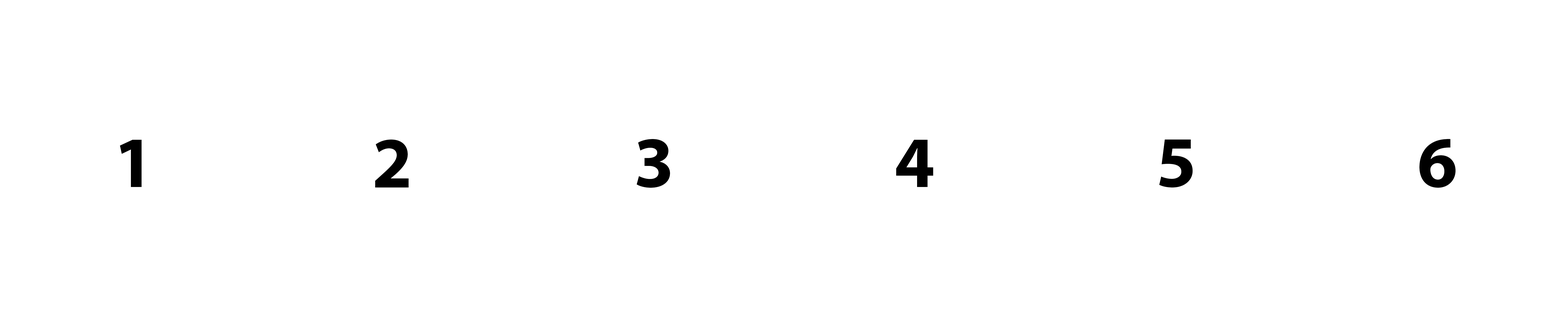
<style>
.page{position:relative;width:1568px;height:327px;background:#ffffff}
.page>*{position:absolute;margin:0}
.t1{font:72.6px "MyriadPro-Bold";color:#000000}
</style>
<div class="page">
<p class="t1" style="left:120px;top:140px;width:22px;height:47px">1</p>
<p class="t1" style="left:375px;top:139px;width:34px;height:48px">2</p>
<p class="t1" style="left:637px;top:139px;width:33px;height:49px">3</p>
<p class="t1" style="left:896px;top:140px;width:37px;height:47px">4</p>
<p class="t1" style="left:1159px;top:139px;width:34px;height:49px">5</p>
<p class="t1" style="left:1419px;top:139px;width:37px;height:49px">6</p>
</div>
